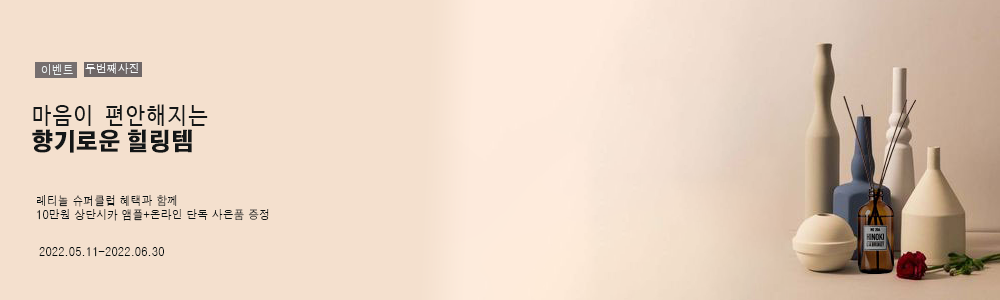
<style>
.page{position:relative;width:1000px;height:300px;background:#f4e0ce}
.page>*{position:absolute;margin:0}
.t1{font:12px "Haansoft-Dotum";letter-spacing:0.01em;color:#eff4f5;text-transform:uppercase;scale:0.9 1}
.t2{font:12px "Haansoft-Dotum";letter-spacing:0.01em;color:#f7f9fa;text-transform:uppercase;scale:0.9 1}
.t3{font:23px/26.8px "D2Codingligature";letter-spacing:0.01em;color:#131617;text-transform:uppercase;scale:0.9 1}
.t4{font:24px/26.8px "AdobeGothicStd-Bold";letter-spacing:0.01em;color:#131617;text-transform:uppercase;font-weight:bold;scale:0.9 1}
.t5{font:12px/14px "Haansoft-Dotum";letter-spacing:0.01em;color:#070f11;text-transform:uppercase;scale:0.9 1}
.t6{font:12px "Haansoft-Dotum";letter-spacing:0.01em;color:#020a0c;text-transform:uppercase;scale:0.9 1}
</style>
<div class="page">
<p class="t1" style="left:41px;top:64px;width:32px;height:11px">이벤트</p>
<p class="t2" style="left:85px;top:63px;width:53px;height:11px">두번째사진</p>
<p class="t3" style="left:32px;top:104px;width:176px;height:49px">마음이 편안해지는<br><span class="t4">향기로운 힐링템</span></p>
<p class="t5" style="left:37px;top:195px;width:232px;height:26px">레티놀 슈퍼클럽 혜택과 함께<br>10만원 상단시카 앰플+온라인 단독 사은품 증정</p>
<p class="t6" style="left:39px;top:247px;width:125px;height:10px">2022.05.11-2022.06.30</p>
</div>
